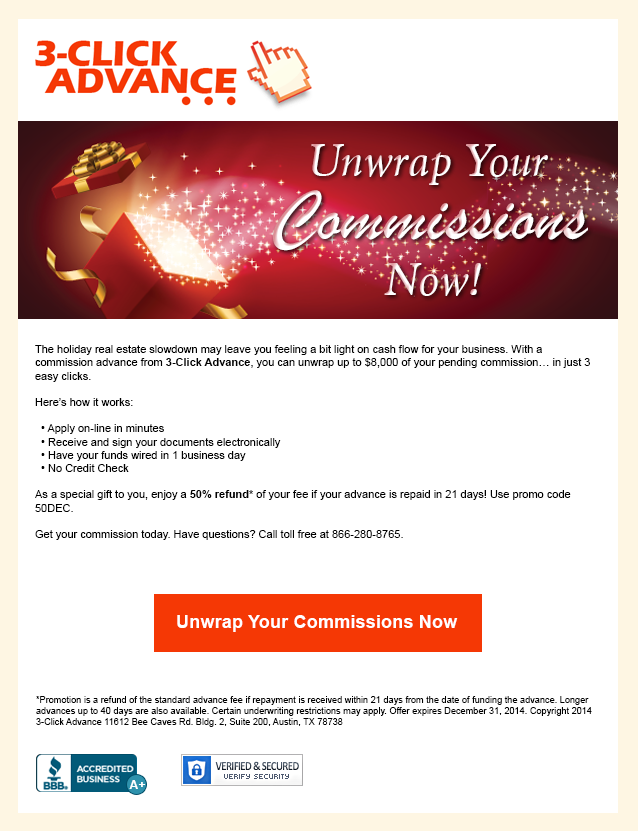
<style>
.page{position:relative;width:638px;height:831px;background:#ffffff}
.page>*{position:absolute;margin:0}
.t1{font:49.3px "Marion-Italic";color:#ffffff;scale:1.04 1}
.t2{font:74.6px "BrushScriptMT";scale:1.04 1}
.t3{font:12px "ArialMT";color:#000000}
.t4{font:12px "Arial-BoldMT";color:#000000}
.t5{font:18.3px "Arial-BoldMT";color:#ffffff}
.t6{font:9.2px "ArialMT";color:#000000}
</style>
<div class="page">
<p class="t1" style="left:311px;top:144px;width:237px;height:41px">Unwrap Your</p>
<p class="t2" style="left:273px;top:190px;width:315px;height:61px">Commissions</p>
<p class="t1" style="left:384px;top:263px;width:97px;height:33px">Now!</p>
<p class="t3" style="left:35px;top:345px;width:555px;height:195px">The holiday real estate slowdown may leave you feeling a bit light on cash flow for your business. With a commission advance from <span class="t4">3-Click Advance</span>, you can unwrap up to $8,000 of your pending commission… in just 3 easy clicks.<br><br>Here’s how it works:<br><br>  • Apply on-line in minutes<br>  • Receive and sign your documents electronically<br>  • Have your funds wired in 1 business day<br>  • No Credit Check<br><br>As a special gift to you, enjoy a <span class="t4">50% refund*</span> of your fee if your advance is repaid in 21 days! Use promo code 50DEC.<br><br>Get your commission today. Have questions? Call toll free at 866-280-8765.</p>
<p class="t5" style="left:177px;top:615px;width:281px;height:17px">Unwrap Your Commissions Now</p>
<p class="t6" style="left:36px;top:696px;width:556px;height:31px">*Promotion is a refund of the standard advance fee if repayment is received within 21 days from the date of funding the advance. Longer advances up to 40 days are also available. Certain underwriting restrictions may apply. Offer expires December 31, 2014. Copyright 2014 3-Click Advance 11612 Bee Caves Rd. Bldg. 2, Suite 200, Austin, TX 78738</p>
</div>
